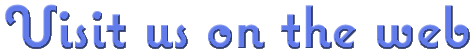
<style>
.page{position:relative;width:476px;height:56px;background:#ffffff}
.page>*{position:absolute;margin:0}
.t1{font:60px "CoquetteBold";color:#617bea}
</style>
<div class="page">
<p class="t1" style="left:5px;top:4px;width:465px;height:45px">Visit us on the web</p>
</div>
